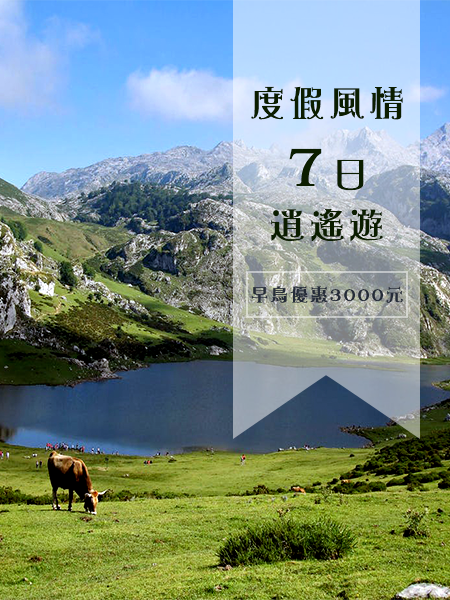
<style>
.page{position:relative;width:450px;height:600px}
.page>*{position:absolute;margin:0}
.t1{font:36px "DFShiYiStd-W5";letter-spacing:0.1em;color:#0b1d00}
.t2{font:36px/72px "DFShiYiStd-W5";letter-spacing:0.1em;color:#0b1d00}
.t3{font:60px/72px "DFShiYiStd-W5";letter-spacing:0.1em;color:#0b1d00}
.t4{font:18px "DFShiYiStd-W5";letter-spacing:0.1em;color:#252c39}
</style>
<div class="page">
<p class="t1" style="left:251px;top:86px;width:152px;height:34px">度假風情</p>
<p class="t2" style="left:271px;top:148px;width:112px;height:94px;text-align:center"><span class="t3">7</span>日<br>逍遙遊</p>
<p class="t4" style="left:251px;top:286px;width:152px;height:17px">早鳥優惠3000元</p>
</div>
